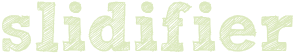
<style>
.page{position:relative;width:295px;height:56px;background:#ffffff}
.page>*{position:absolute;margin:0}
.t1{font:70px "SketchRockwell";color:#dce9be}
</style>
<div class="page">
<p class="t1" style="left:2px;top:1px;width:291px;height:52px">slidifier</p>
</div>
